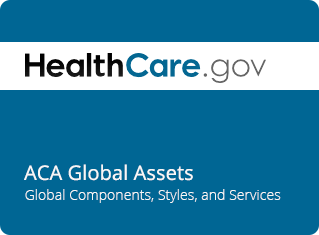
<style>
.page{position:relative;width:319px;height:235px;background:#006694}
.page>*{position:absolute;margin:0}
.t1{font:20px "OpenSans";letter-spacing:0.005em;color:#f7f7f7}
.t2{font:14px "OpenSans-Light";letter-spacing:0.005em;color:#f7f7f7}
</style>
<div class="page">
<p class="t1" style="left:24px;top:164px;width:169px;height:17px">ACA Global Assets</p>
<p class="t2" style="left:25px;top:189px;width:256px;height:14px">Global Components, Styles, and Services</p>
</div>
